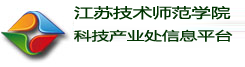
<style>
.page{position:relative;width:245px;height:67px;background:#ffffff}
.page>*{position:absolute;margin:0}
.t1{font:12.2px "MicrosoftYaHei";color:#003300;scale:1.44 1}
.t2{font:13.6px "MicrosoftYaHei";color:#003300;scale:1.44 1}
</style>
<div class="page">
<p class="t1" style="left:74px;top:6px;width:159px;height:36px"><span class="t2">江苏技术师范学院<br></span>科技产业处信息平台</p>
</div>
